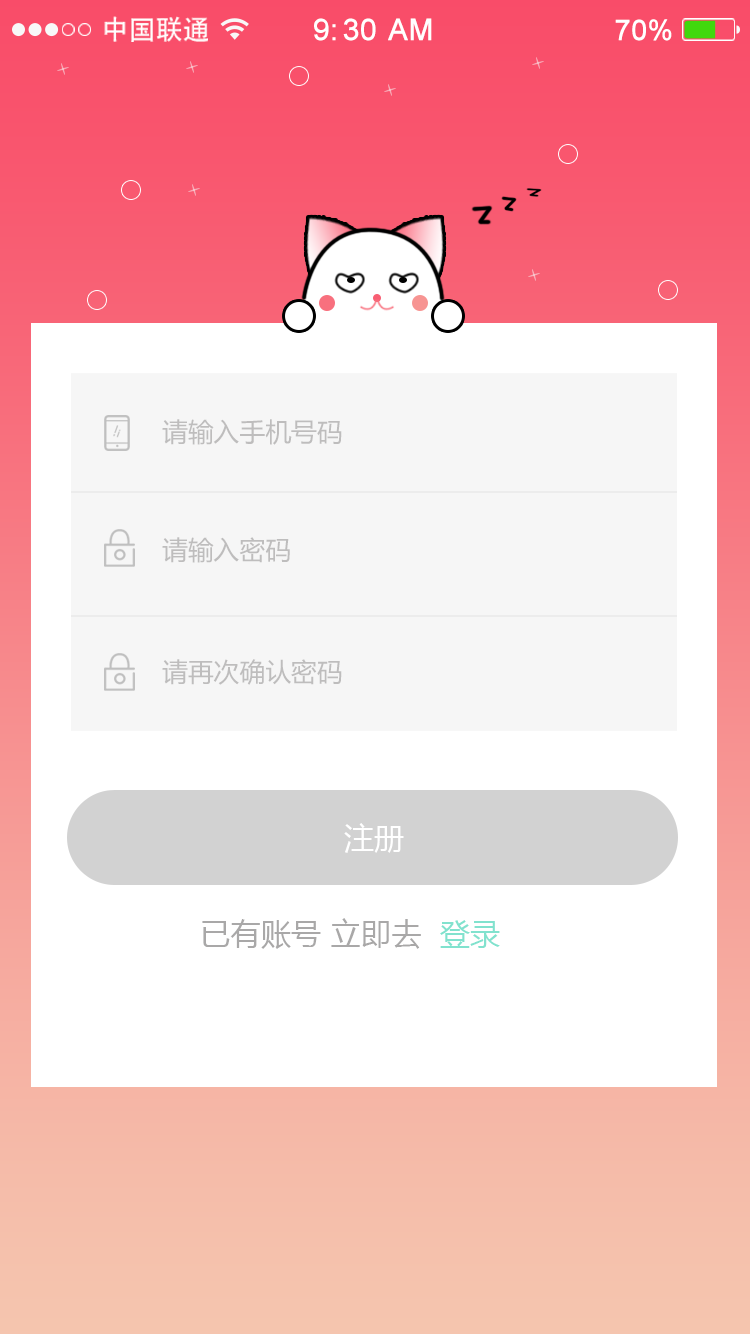
<style>
.page{position:relative;width:750px;height:1334px;background:#ffffff}
.page>*{position:absolute;margin:0}
.t1{font:27.1px "AdobeHeitiStd-Regular";color:#ffffff}
.t2{font:29.5px "ArialMT";color:#ffffff;font-weight:bold}
.t3{font:28.3px "ArialMT";color:#ffffff;font-weight:bold}
.t4{font:26.1px "MicrosoftYaHei";color:#bebdbd}
.t5{font:30px "MicrosoftYaHei";color:#ffffff}
.t6{font:30.6px "MicrosoftYaHei";color:#a9a8a8}
.t7{font:30.6px "MicrosoftYaHei";color:#81e2ce}
</style>
<div class="page">
<p class="t1" style="left:104px;top:16px;width:104px;height:26px">中国联通</p>
<p class="t2" style="left:314px;top:18px;width:118px;height:23px">9:30 AM</p>
<p class="t3" style="left:615px;top:19px;width:57px;height:22px">70%</p>
<p class="t4" style="left:162px;top:419px;width:180px;height:26px">请输入手机号码</p>
<p class="t4" style="left:162px;top:537px;width:128px;height:26px">请输入密码</p>
<p class="t4" style="left:162px;top:659px;width:180px;height:26px">请再次确认密码</p>
<p class="t5" style="left:344px;top:823px;width:60px;height:30px">注册</p>
<p class="t6" style="left:202px;top:918px;width:298px;height:31px">已有账号 立即去  <span class="t7">登录</span></p>
</div>
